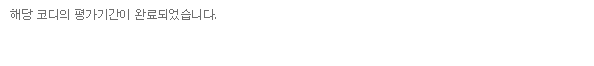
<style>
.page{position:relative;width:594px;height:66px;background:#ffffff}
.page>*{position:absolute;margin:0}
.t1{font:12px "Dotum";letter-spacing:-0.05em;color:#6f6f6f}
</style>
<div class="page">
<p class="t1" style="left:10px;top:9px;width:206px;height:11px">해당 코디의 평가기간이 완료되었습니다.</p>
</div>
